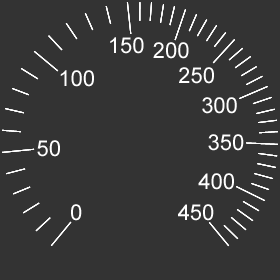
<style>
.page{position:relative;width:280px;height:280px;background:#333333}
.page>*{position:absolute;margin:0}
.t1{font:22px "ArialMT";color:#ffffff}
</style>
<div class="page">
<p class="t1" style="left:110px;top:37px;width:34px;height:17px">150</p>
<p class="t1" style="left:153px;top:42px;width:36px;height:17px">200</p>
<p class="t1" style="left:60px;top:70px;width:34px;height:17px">100</p>
<p class="t1" style="left:179px;top:67px;width:35px;height:17px">250</p>
<p class="t1" style="left:202px;top:97px;width:35px;height:17px">300</p>
<p class="t1" style="left:208px;top:134px;width:36px;height:17px">350</p>
<p class="t1" style="left:37px;top:140px;width:23px;height:17px">50</p>
<p class="t1" style="left:198px;top:173px;width:36px;height:17px">400</p>
<p class="t1" style="left:71px;top:204px;width:11px;height:17px">0</p>
<p class="t1" style="left:178px;top:204px;width:36px;height:17px">450</p>
</div>
